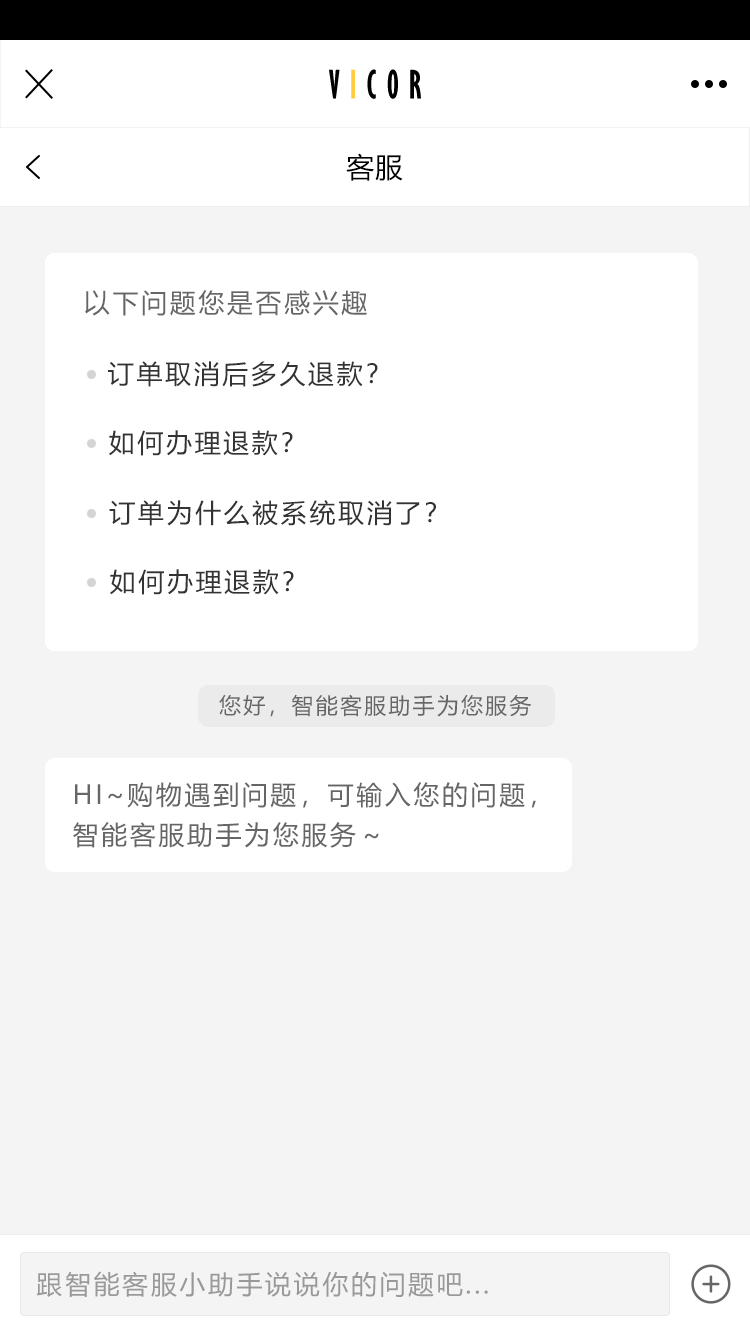
<style>
.page{position:relative;width:750px;height:1334px;background:#f4f4f4}
.page>*{position:absolute;margin:0}
.t1{font:36px "GillSansMT-ExtraCondensedBold";letter-spacing:0.3em;color:#000000;text-transform:uppercase}
.t2{font:36px "GillSansMT-ExtraCondensedBold";letter-spacing:0.3em;color:#ffcb3f;text-transform:uppercase}
.t3{font:28px "MicrosoftYaHei";letter-spacing:0.03em;color:#000000;text-transform:uppercase}
.t4{font:26px "MicrosoftYaHei";letter-spacing:0.1em;color:#666666;text-transform:uppercase}
.t5{font:26px "MicrosoftYaHei";letter-spacing:0.1em;color:#333333;text-transform:uppercase}
.t6{font:22px "MicrosoftYaHei";letter-spacing:0.1em;color:#666666;text-transform:uppercase}
.t7{font:26px/40px "MicrosoftYaHei";letter-spacing:0.1em;color:#666666;text-transform:uppercase}
.t8{font:26px "MicrosoftYaHei";letter-spacing:0.1em;color:#999999;text-transform:uppercase}
</style>
<div class="page">
<p class="t1" style="left:329px;top:69px;width:92px;height:30px">v<span class="t2">i</span>cor</p>
<p class="t3" style="left:346px;top:153px;width:57px;height:28px">客服</p>
<p class="t4" style="left:85px;top:290px;width:282px;height:26px">以下问题您是否感兴趣</p>
<p class="t5" style="left:108px;top:361px;width:270px;height:26px">订单取消后多久退款？</p>
<p class="t5" style="left:109px;top:430px;width:184px;height:26px">如何办理退款？</p>
<p class="t5" style="left:109px;top:500px;width:327px;height:26px">订单为什么被系统取消了？</p>
<p class="t5" style="left:110px;top:569px;width:184px;height:26px">如何办理退款？</p>
<p class="t6" style="left:219px;top:694px;width:313px;height:23px">您好，智能客服助手为您服务</p>
<p class="t7" style="left:73px;top:782px;width:463px;height:66px">Hi~购物遇到问题，可输入您的问题，<br>智能客服助手为您服务～</p>
<p class="t8" style="left:36px;top:1271px;width:452px;height:27px">跟智能客服小助手说说你的问题吧...</p>
</div>
